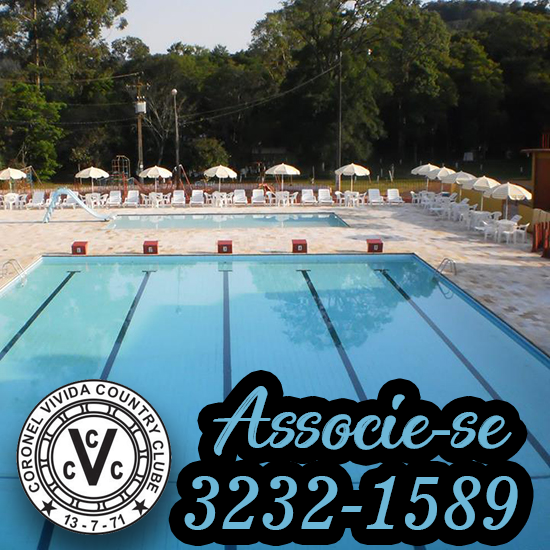
<style>
.page{position:relative;width:550px;height:550px}
.page>*{position:absolute;margin:0}
.t1{font:72px "Enchanting-Celebrations";color:#6db7d7}
.t2{font:72px "MyriadPro-Regular";color:#6db7d7}
.t3{font:72px "News701BT-ItalicA";color:#6db7d7}
</style>
<div class="page">
<p class="t1" style="left:213px;top:386px;width:299px;height:70px">Associe<span class="t2">-</span>se</p>
<p class="t3" style="left:184px;top:476px;width:334px;height:54px">3232-1589</p>
</div>
